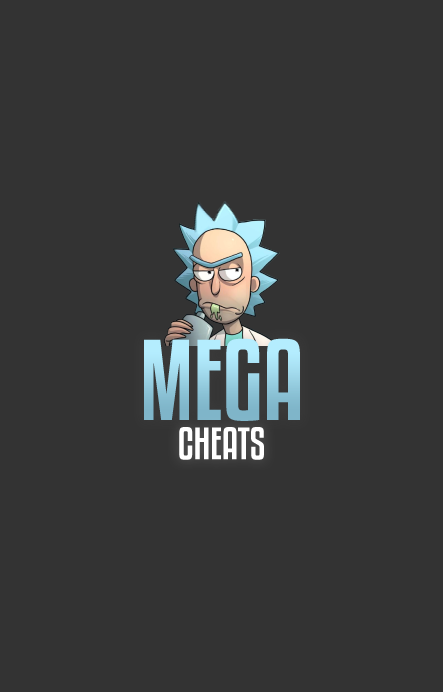
<style>
.page{position:relative;width:443px;height:692px;background:#333333}
.page>*{position:absolute;margin:0}
.t1{font:101.2px "KenyanCoffeeRg-Regular"}
.t2{font:40.1px "KenyanCoffeeRg-Regular";color:#ffffff}
</style>
<div class="page">
<p class="t1" style="left:144px;top:338px;width:156px;height:83px">MEGA</p>
<p class="t2" style="left:179px;top:427px;width:85px;height:33px">CHEATS</p>
</div>
